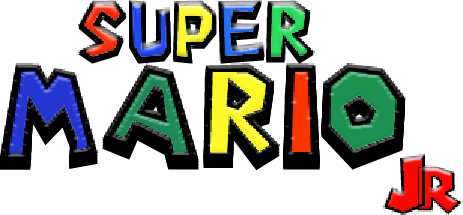
<style>
.page{position:relative;width:463px;height:215px;background:#ffffff}
.page>*{position:absolute;margin:0}
.t1{font:75.2px "Super-Mario-Bros.-Regular";color:#000000}
.t2{font:120.3px "Super-Mario-Bros.-Regular";color:#000000}
</style>
<div class="page">
<p class="t1" style="left:78px;top:3px;width:236px;height:61px">Super</p>
<p class="t1" style="left:78px;top:2px;width:236px;height:61px">Super</p>
<p class="t2" style="left:0px;top:64px;width:405px;height:97px">Mario</p>
<p class="t2" style="left:0px;top:73px;width:405px;height:98px">Mario</p>
<p class="t2" style="left:0px;top:72px;width:405px;height:97px">Mario</p>
<p class="t2" style="left:0px;top:70px;width:405px;height:98px">Mario</p>
<p class="t2" style="left:0px;top:69px;width:405px;height:97px">Mario</p>
<p class="t2" style="left:0px;top:67px;width:405px;height:97px">Mario</p>
<p class="t2" style="left:0px;top:66px;width:405px;height:97px">Mario</p>
</div>
